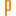
<style>
.page{position:relative;width:16px;height:16px;background:#ffffff}
.page>*{position:absolute;margin:0}
.t1{font:24.1px "Fairview-Regular";color:#f48707;scale:1.03 1}
</style>
<div class="page">
<p class="t1" style="left:5px;top:0px;width:6px;height:16px">P</p>
</div>
